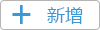
<style>
.page{position:relative;width:100px;height:30px;background:#ffffff}
.page>*{position:absolute;margin:0}
.t1{font:36px "MicrosoftYaHei";color:#3998d6}
.t2{font:18px "MicrosoftYaHei";color:#3998d6}
</style>
<div class="page">
<p class="t1" style="left:12px;top:5px;width:19px;height:19px">+</p>
<p class="t2" style="left:47px;top:7px;width:36px;height:17px">新增</p>
</div>
